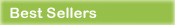
<style>
.page{position:relative;width:175px;height:25px;background:#96c04a}
.page>*{position:absolute;margin:0}
.t1{font:14.2px "ArialRoundedMTBold";color:#fdfcfc;scale:1.07 1}
</style>
<div class="page">
<p class="t1" style="left:10px;top:7px;width:87px;height:11px">Best Sellers</p>
</div>
